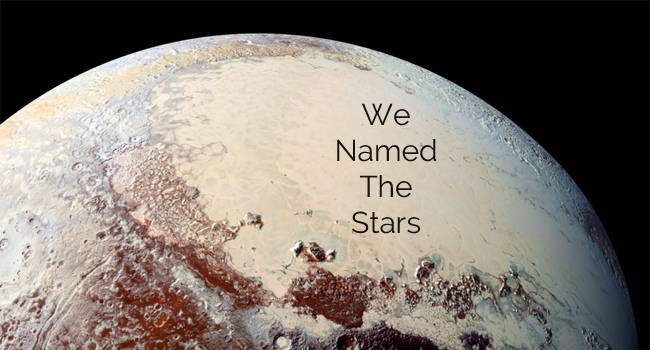
<style>
.page{position:relative;width:650px;height:350px;background:#000000}
.page>*{position:absolute;margin:0}
.t1{font:30px "Raleway-Regular";color:#141414}
</style>
<div class="page">
<p class="t1" style="left:337px;top:103px;width:99px;height:131px;text-align:center">We<br>Named<br>The<br>Stars</p>
</div>
